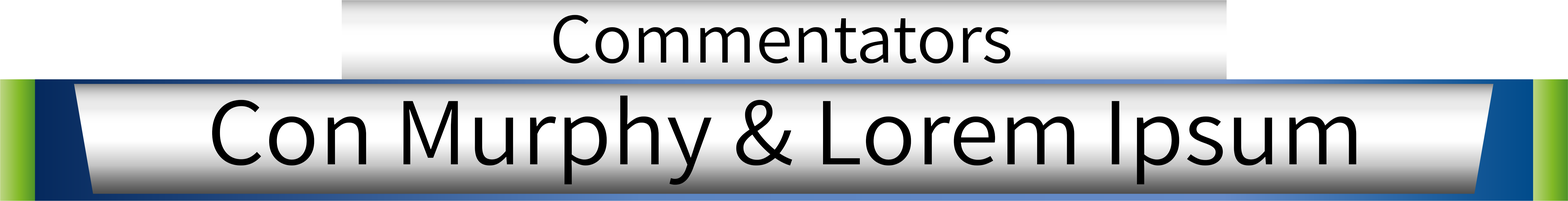
<style>
.page{position:relative;width:1568px;height:201px;background:#ffffff}
.page>*{position:absolute;margin:0}
.t1{font:71.1px "Assistant-Regular";color:#000000;scale:1.05 1}
.t2{font:96.2px "Assistant-Regular";color:#000000;scale:1.05 1}
</style>
<div class="page">
<p class="t1" style="left:553px;top:15px;width:457px;height:49px">Commentators</p>
<p class="t2" style="left:212px;top:95px;width:1144px;height:90px">Con Murphy &amp; Lorem Ipsum</p>
</div>
